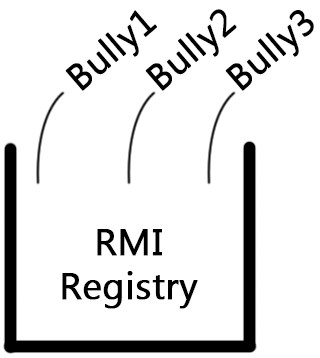
<style>
.page{position:relative;width:320px;height:358px;background:#ffffff}
.page>*{position:absolute;margin:0}
.t1{font:37px "MicrosoftTaiLe";color:#000000;font-weight:bold}
</style>
<div class="page">
<p class="t1" style="left:65px;top:10px;width:92px;height:81px;rotate:-41deg">Bully1</p>
<p class="t1" style="left:145px;top:9px;width:92px;height:82px;rotate:-41deg">Bully2</p>
<p class="t1" style="left:225px;top:10px;width:89px;height:81px;rotate:-41deg">Bully3</p>
<p class="t1" style="left:62px;top:229px;width:136px;height:80px;text-align:center">RMI <br>Registry</p>
</div>
